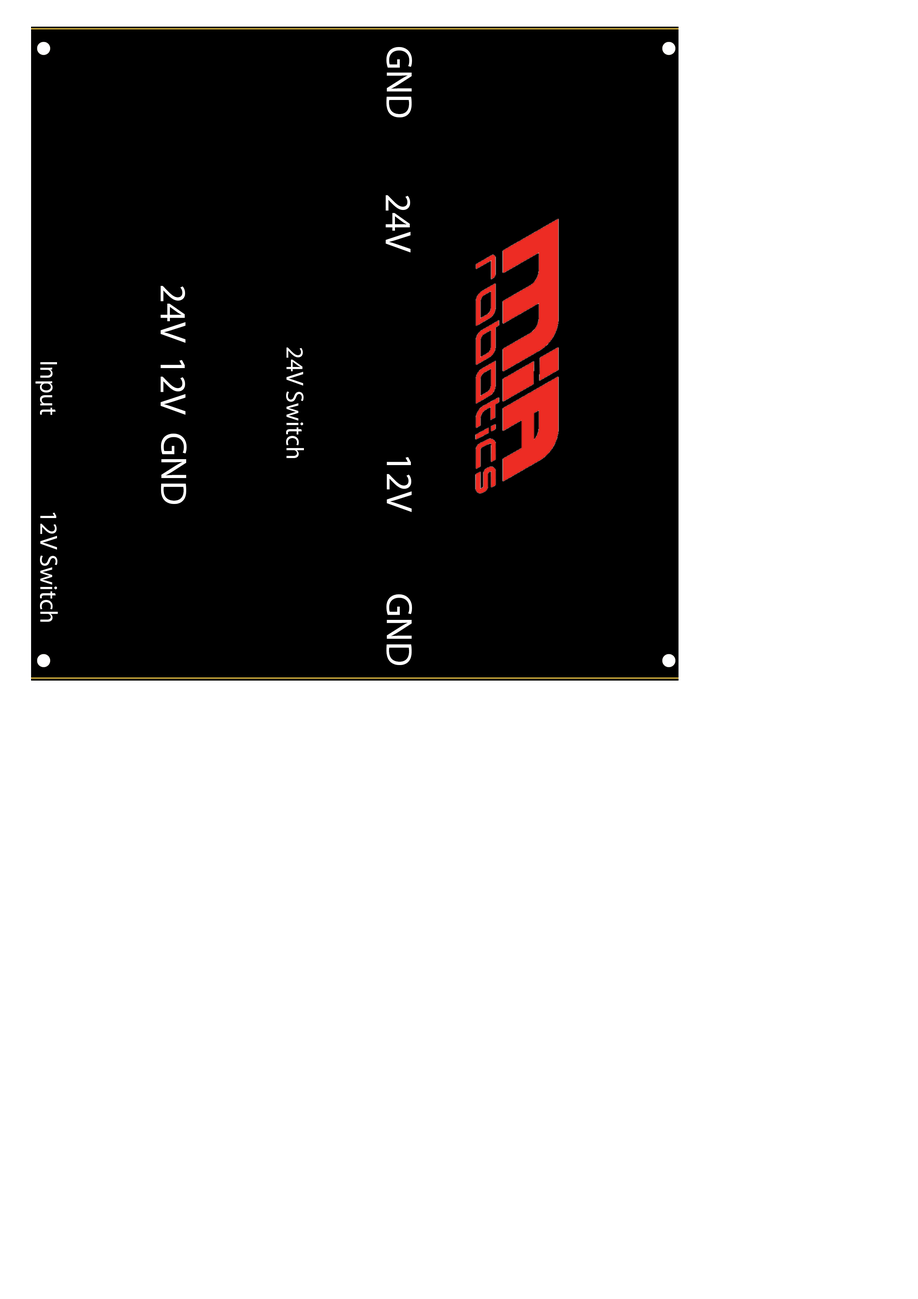
<style>
.page{position:relative;width:918px;height:1299px;background:#ffffff}
.page>*{position:absolute;margin:0}
.t1{font:37px "MyriadPro-Regular";color:#ffffff}
.t2{font:24.7px "MyriadPro-Regular";color:#ffffff}
</style>
<div class="page">
<p class="t1" style="left:387px;top:47px;width:25px;height:70px;rotate:90deg">GND</p>
<p class="t1" style="left:386px;top:195px;width:25px;height:57px;rotate:90deg">24V</p>
<p class="t1" style="left:161px;top:286px;width:24px;height:57px;rotate:90deg">24V<br><br><br>V</p>
<p class="t2" style="left:286px;top:347px;width:18px;height:111px;rotate:90deg">24V Switch</p>
<p class="t2" style="left:36px;top:362px;width:21px;height:53px;rotate:90deg">Input</p>
<p class="t1" style="left:161px;top:360px;width:24px;height:55px;rotate:90deg">12V</p>
<p class="t1" style="left:161px;top:434px;width:26px;height:70px;rotate:90deg">GND</p>
<p class="t1" style="left:387px;top:457px;width:25px;height:55px;rotate:90deg">12V</p>
<p class="t2" style="left:40px;top:512px;width:18px;height:110px;rotate:90deg">12V Switch</p>
<p class="t1" style="left:387px;top:594px;width:25px;height:71px;rotate:90deg">GND</p>
</div>
